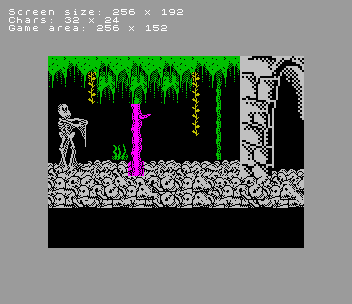
<style>
.page{position:relative;width:352px;height:304px;background:#9b9b9b}
.page>*{position:absolute;margin:0}
.t1{font:7px/8px "ZX-Spectrum";color:#ffffff}
</style>
<div class="page">
<p class="t1" style="left:9px;top:9px;width:174px;height:22px">Screen size: 256 x 192<br>Chars: 32 x 24<br>Game area: 256 x 152</p>
</div>
